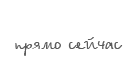
<style>
.page{position:relative;width:124px;height:59px;background:#ffffff}
.page>*{position:absolute;margin:0}
.t1{font:20px "BetinaScript";color:#5b5b5b}
</style>
<div class="page">
<p class="t1" style="left:15px;top:37px;width:108px;height:19px">прямо сейчас</p>
</div>
